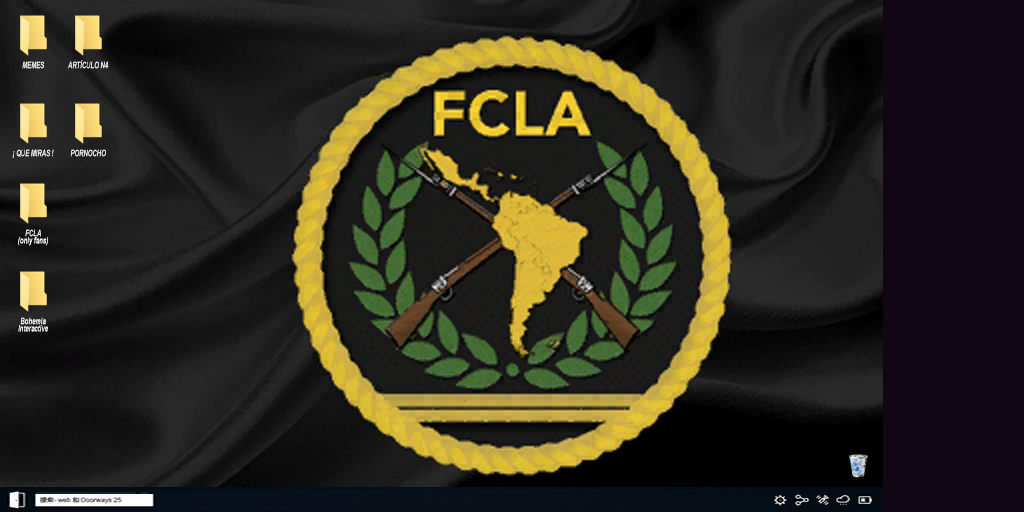
<style>
.page{position:relative;width:1024px;height:512px}
.page>*{position:absolute;margin:0}
.t1{font:9px "Arial-BoldItalicMT";color:#ffffff;scale:0.67 1}
</style>
<div class="page">
<p class="t1" style="left:22px;top:61px;width:23px;height:8px">MEMES</p>
<p class="t1" style="left:68px;top:60px;width:41px;height:9px">ARTÍCULO N4</p>
<p class="t1" style="left:12px;top:149px;width:42px;height:9px">¡ QUE MIRAS !</p>
<p class="t1" style="left:70px;top:149px;width:36px;height:8px">PORNOCHO</p>
<p class="t1" style="left:18px;top:229px;width:30px;height:17px;text-align:center">FCLA <br>(only fans)</p>
<p class="t1" style="left:18px;top:317px;width:30px;height:15px">Bohemia Interactive</p>
</div>
